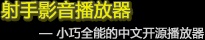
<style>
.page{position:relative;width:205px;height:40px;background:#000000}
.page>*{position:absolute;margin:0}
.t1{font:18px "MicrosoftYaHei";color:#ecec00;font-weight:bold}
.t2{font:12px "MicrosoftYaHei";color:#d0d0d0;font-weight:bold}
</style>
<div class="page">
<p class="t1" style="left:1px;top:0px;width:130px;height:19px">射手影音播放器</p>
<p class="t2" style="left:39px;top:26px;width:165px;height:13px">— 小巧全能的中文开源播放器</p>
</div>
